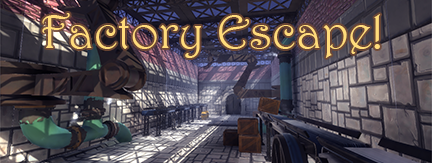
<style>
.page{position:relative;width:432px;height:163px}
.page>*{position:absolute;margin:0}
.t1{font:48px "Harrington";color:#ffdb7b}
</style>
<div class="page">
<p class="t1" style="left:42px;top:13px;width:339px;height:45px">Factory Escape!</p>
</div>
